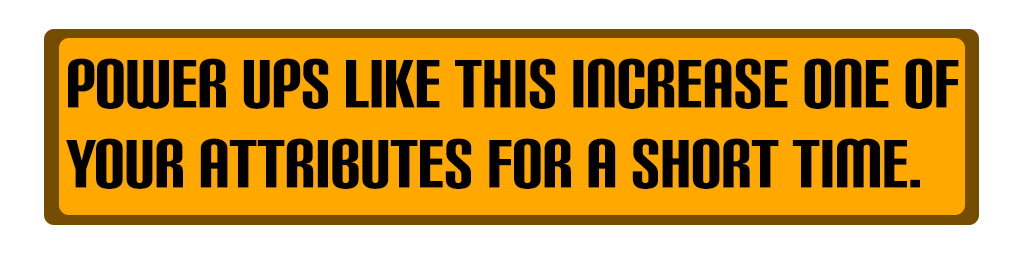
<style>
.page{position:relative;width:1024px;height:256px;background:#ffa800}
.page>*{position:absolute;margin:0}
.t1{font:66.7px "CarbonBl-Regular";color:#000000;scale:0.91 1}
</style>
<div class="page">
<p class="t1" style="left:66px;top:58px;width:893px;height:131px">Power ups like this increase one of your attributes for a short time.</p>
</div>
